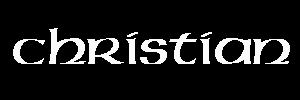
<style>
.page{position:relative;width:300px;height:100px;background:#000000}
.page>*{position:absolute;margin:0}
.t1{font:53.3px "Herald";color:#fcfbfb}
</style>
<div class="page">
<p class="t1" style="left:13px;top:28px;width:277px;height:36px">christian</p>
</div>
